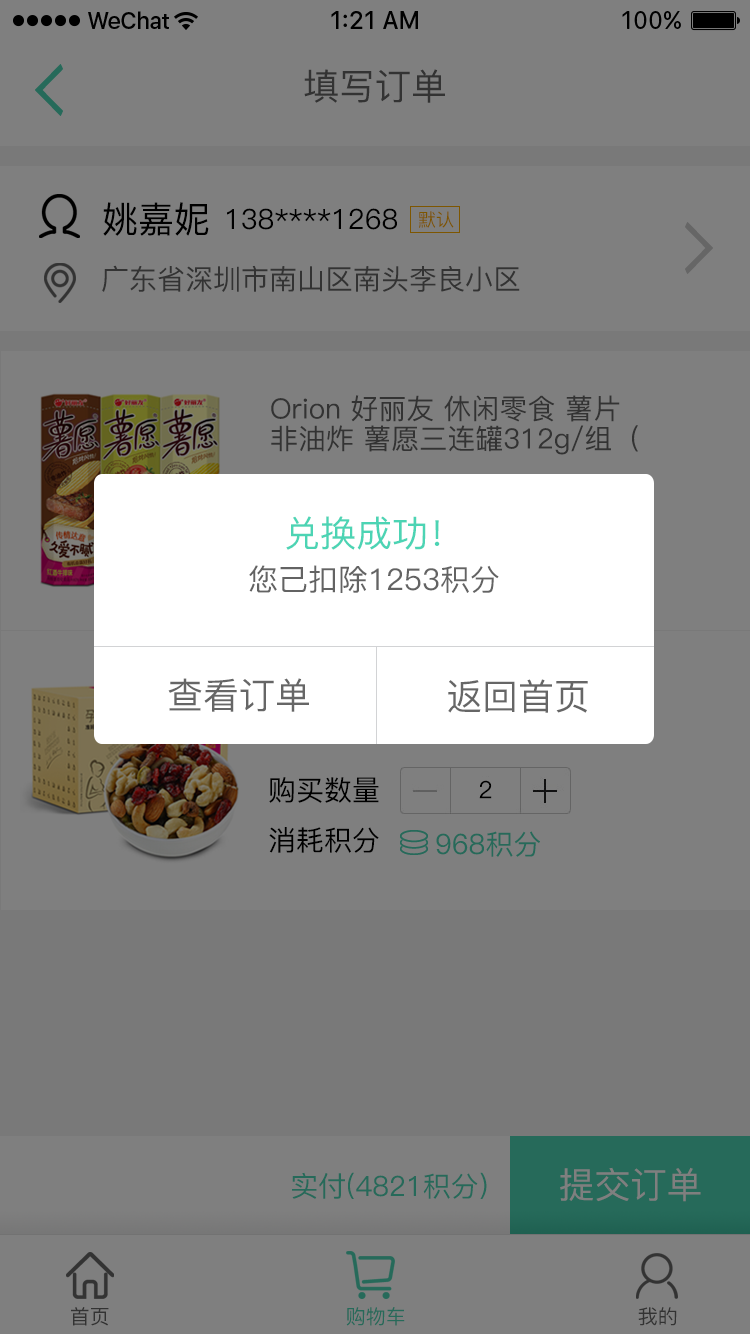
<style>
.page{position:relative;width:750px;height:1334px;background:#7f7f7f}
.page>*{position:absolute;margin:0}
.t1{font:36px "PingFang-SC-Medium";color:#333333}
.t2{font:36px "PingFang-SC-Medium";color:#000000}
.t3{font:28px "PingFang-SC-Medium";color:#000000}
.t4{font:18px "PingFang-SC-Medium";color:#7e5600}
.t5{font:28px "PingFang-SC-Medium";color:#333333}
.t6{font:28px/30px "PingFang-SC-Medium";color:#333333}
.t7{font:30px/48px "PingFang-SC-Medium";color:#636363}
.t8{font:36px/48px "PingFang-SC-Medium";color:#4cd4b4}
.t9{font:36px "PingFang-SC-Medium";color:#666666}
.t10{font:28px/50px "PingFang-SC-Medium";color:#000000}
.t11{font:24px "PingFang-SC-Medium";color:#000000}
.t12{font:28px "PingFang-SC-Medium";color:#266a5a}
.t13{font:36px "PingFang-SC-Medium";color:#7f7f7f}
.t14{font:20px "PingFang-SC-Medium";color:#333333}
.t15{font:20px "PingFang-SC-Medium";color:#266a5a}
</style>
<div class="page">
<p class="t1" style="left:304px;top:69px;width:141px;height:34px">填写订单</p>
<p class="t2" style="left:103px;top:202px;width:106px;height:34px">姚嘉妮</p>
<p class="t3" style="left:227px;top:208px;width:170px;height:22px">138****1268</p>
<p class="t4" style="left:419px;top:211px;width:35px;height:17px">默认</p>
<p class="t5" style="left:102px;top:265px;width:418px;height:27px">广东省深圳市南山区南头李良小区</p>
<p class="t6" style="left:271px;top:395px;width:367px;height:60px">Orion 好丽友 休闲零食 薯片 非油炸 薯愿三连罐312g/组（104g*3薯片）</p>
<p class="t7" style="left:249px;top:516px;width:250px;height:77px;text-align:center"><span class="t8">兑换成功！<br></span>您己扣除1253积分</p>
<p class="t9" style="left:168px;top:678px;width:141px;height:34px">查看订单</p>
<p class="t9" style="left:448px;top:679px;width:140px;height:34px">返回首页</p>
<p class="t10" style="left:269px;top:777px;width:110px;height:76px">购买数量<br>消耗积分</p>
<p class="t11" style="left:479px;top:780px;width:13px;height:19px">2</p>
<p class="t12" style="left:436px;top:831px;width:104px;height:26px">968积分</p>
<p class="t13" style="left:560px;top:1167px;width:141px;height:35px">提交订单</p>
<p class="t12" style="left:292px;top:1172px;width:195px;height:27px">实付(4821积分)</p>
<p class="t14" style="left:71px;top:1307px;width:38px;height:19px">首页</p>
<p class="t15" style="left:346px;top:1307px;width:59px;height:19px">购物车</p>
<p class="t14" style="left:638px;top:1307px;width:39px;height:19px">我的</p>
</div>
